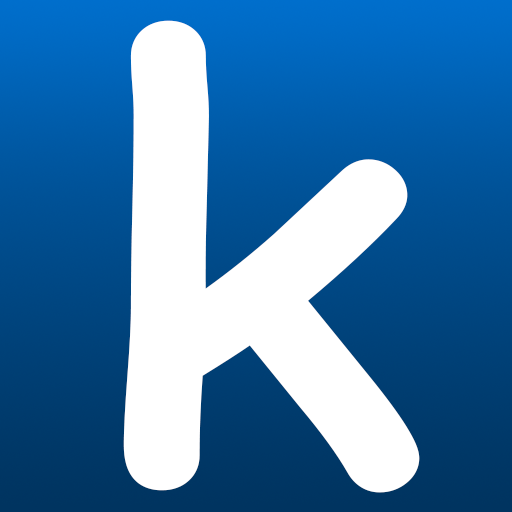
<style>
.page{position:relative;width:512px;height:512px;background:#ffffff}
.page>*{position:absolute;margin:0}
.t1{font:568.1px "ComicSansMS";color:#ffffff;font-weight:bold;scale:1.11 1}
</style>
<div class="page">
<p class="t1" style="left:123px;top:20px;width:297px;height:473px">k</p>
</div>
